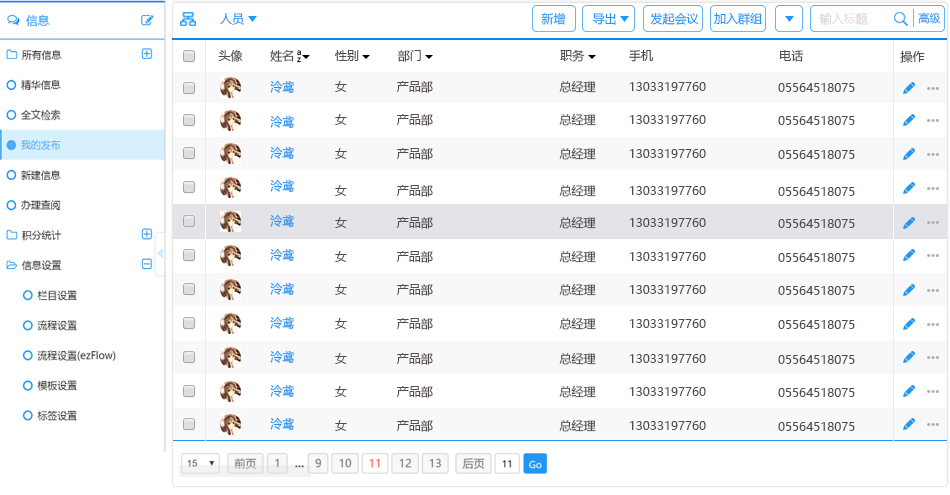
<style>
.page{position:relative;width:950px;height:495px;background:#ffffff}
.page>*{position:absolute;margin:0}
.t1{font:12px "MicrosoftYaHei";color:#2196f3}
.t2{font:12px "MicrosoftYaHei"}
.t3{font:12px "MicrosoftYaHeiLight";color:#dcd6d6}
.t4{font:11px "MicrosoftYaHei";color:#2196f3}
.t5{font:12px "MicrosoftYaHei";color:#544c4c}
.t6{font:8px "MicrosoftYaHei"}
</style>
<div class="page">
<p class="t1" style="left:220px;top:13px;width:24px;height:12px">人员</p>
<p class="t2" style="left:541px;top:13px;width:24px;height:12px">新增</p>
<p class="t1" style="left:592px;top:13px;width:24px;height:12px">导出</p>
<p class="t1" style="left:650px;top:12px;width:49px;height:13px">发起会议</p>
<p class="t1" style="left:713px;top:12px;width:50px;height:13px">加入群组</p>
<p class="t3" style="left:819px;top:12px;width:49px;height:13px">输入标题</p>
<p class="t4" style="left:918px;top:12px;width:23px;height:12px">高级</p>
<p class="t5" style="left:218px;top:49px;width:25px;height:13px">头像</p>
<p class="t5" style="left:270px;top:50px;width:24px;height:12px">姓名</p>
<p class="t6" style="left:297px;top:50px;width:4px;height:6px">a</p>
<p class="t5" style="left:335px;top:50px;width:24px;height:11px">性别</p>
<p class="t5" style="left:397px;top:50px;width:24px;height:12px">部门</p>
<p class="t5" style="left:560px;top:49px;width:25px;height:13px">职务</p>
<p class="t5" style="left:629px;top:50px;width:25px;height:12px">手机</p>
<p class="t5" style="left:780px;top:50px;width:24px;height:12px">电话</p>
<p class="t5" style="left:900px;top:50px;width:25px;height:13px">操作</p>
<p class="t6" style="left:297px;top:57px;width:4px;height:6px">z</p>
<p class="t1" style="left:270px;top:80px;width:24px;height:13px">泠鸢</p>
<p class="t5" style="left:335px;top:81px;width:12px;height:11px">女</p>
<p class="t5" style="left:396px;top:81px;width:37px;height:12px">产品部</p>
<p class="t5" style="left:559px;top:81px;width:37px;height:12px">总经理</p>
<p class="t5" style="left:629px;top:82px;width:77px;height:9px">13033197760</p>
<p class="t5" style="left:778px;top:83px;width:77px;height:9px">05564518075</p>
<p class="t1" style="left:270px;top:115px;width:24px;height:13px">泠鸢</p>
<p class="t5" style="left:335px;top:114px;width:12px;height:11px">女</p>
<p class="t5" style="left:396px;top:114px;width:37px;height:12px">产品部</p>
<p class="t5" style="left:559px;top:114px;width:37px;height:12px">总经理</p>
<p class="t5" style="left:629px;top:115px;width:77px;height:9px">13033197760</p>
<p class="t5" style="left:778px;top:116px;width:77px;height:9px">05564518075</p>
<p class="t1" style="left:270px;top:146px;width:24px;height:13px">泠鸢</p>
<p class="t5" style="left:335px;top:148px;width:12px;height:11px">女</p>
<p class="t5" style="left:396px;top:148px;width:37px;height:12px">产品部</p>
<p class="t5" style="left:559px;top:148px;width:37px;height:12px">总经理</p>
<p class="t5" style="left:629px;top:149px;width:77px;height:9px">13033197760</p>
<p class="t5" style="left:778px;top:150px;width:77px;height:9px">05564518075</p>
<p class="t1" style="left:270px;top:179px;width:24px;height:13px">泠鸢</p>
<p class="t5" style="left:335px;top:185px;width:12px;height:11px">女</p>
<p class="t5" style="left:396px;top:185px;width:37px;height:12px">产品部</p>
<p class="t5" style="left:559px;top:185px;width:37px;height:12px">总经理</p>
<p class="t5" style="left:629px;top:186px;width:77px;height:9px">13033197760</p>
<p class="t5" style="left:778px;top:187px;width:77px;height:9px">05564518075</p>
<p class="t1" style="left:270px;top:214px;width:24px;height:13px">泠鸢</p>
<p class="t5" style="left:335px;top:217px;width:12px;height:11px">女</p>
<p class="t5" style="left:396px;top:217px;width:37px;height:12px">产品部</p>
<p class="t5" style="left:559px;top:217px;width:37px;height:12px">总经理</p>
<p class="t5" style="left:629px;top:218px;width:77px;height:9px">13033197760</p>
<p class="t5" style="left:778px;top:219px;width:77px;height:9px">05564518075</p>
<p class="t1" style="left:270px;top:248px;width:24px;height:13px">泠鸢</p>
<p class="t5" style="left:335px;top:251px;width:12px;height:11px">女</p>
<p class="t5" style="left:396px;top:251px;width:37px;height:12px">产品部</p>
<p class="t5" style="left:559px;top:251px;width:37px;height:12px">总经理</p>
<p class="t5" style="left:629px;top:252px;width:77px;height:9px">13033197760</p>
<p class="t5" style="left:778px;top:253px;width:77px;height:9px">05564518075</p>
<p class="t1" style="left:270px;top:282px;width:24px;height:13px">泠鸢</p>
<p class="t5" style="left:335px;top:284px;width:12px;height:11px">女</p>
<p class="t5" style="left:396px;top:284px;width:37px;height:12px">产品部</p>
<p class="t5" style="left:559px;top:284px;width:37px;height:12px">总经理</p>
<p class="t5" style="left:629px;top:285px;width:77px;height:9px">13033197760</p>
<p class="t5" style="left:778px;top:286px;width:77px;height:9px">05564518075</p>
<p class="t1" style="left:270px;top:316px;width:24px;height:13px">泠鸢</p>
<p class="t5" style="left:335px;top:318px;width:12px;height:11px">女</p>
<p class="t5" style="left:396px;top:318px;width:37px;height:12px">产品部</p>
<p class="t5" style="left:559px;top:318px;width:37px;height:12px">总经理</p>
<p class="t5" style="left:629px;top:319px;width:77px;height:9px">13033197760</p>
<p class="t5" style="left:778px;top:320px;width:77px;height:9px">05564518075</p>
<p class="t1" style="left:270px;top:350px;width:24px;height:13px">泠鸢</p>
<p class="t5" style="left:335px;top:353px;width:12px;height:11px">女</p>
<p class="t5" style="left:396px;top:353px;width:37px;height:12px">产品部</p>
<p class="t5" style="left:559px;top:353px;width:37px;height:12px">总经理</p>
<p class="t5" style="left:629px;top:354px;width:77px;height:9px">13033197760</p>
<p class="t5" style="left:778px;top:355px;width:77px;height:9px">05564518075</p>
<p class="t1" style="left:270px;top:384px;width:24px;height:13px">泠鸢</p>
<p class="t5" style="left:335px;top:386px;width:12px;height:11px">女</p>
<p class="t5" style="left:396px;top:386px;width:37px;height:12px">产品部</p>
<p class="t5" style="left:559px;top:386px;width:37px;height:12px">总经理</p>
<p class="t5" style="left:629px;top:387px;width:77px;height:9px">13033197760</p>
<p class="t5" style="left:778px;top:388px;width:77px;height:9px">05564518075</p>
<p class="t1" style="left:270px;top:417px;width:24px;height:13px">泠鸢</p>
<p class="t5" style="left:335px;top:420px;width:12px;height:11px">女</p>
<p class="t5" style="left:396px;top:420px;width:37px;height:12px">产品部</p>
<p class="t5" style="left:559px;top:420px;width:37px;height:12px">总经理</p>
<p class="t5" style="left:629px;top:421px;width:77px;height:9px">13033197760</p>
<p class="t5" style="left:778px;top:422px;width:77px;height:9px">05564518075</p>
</div>
